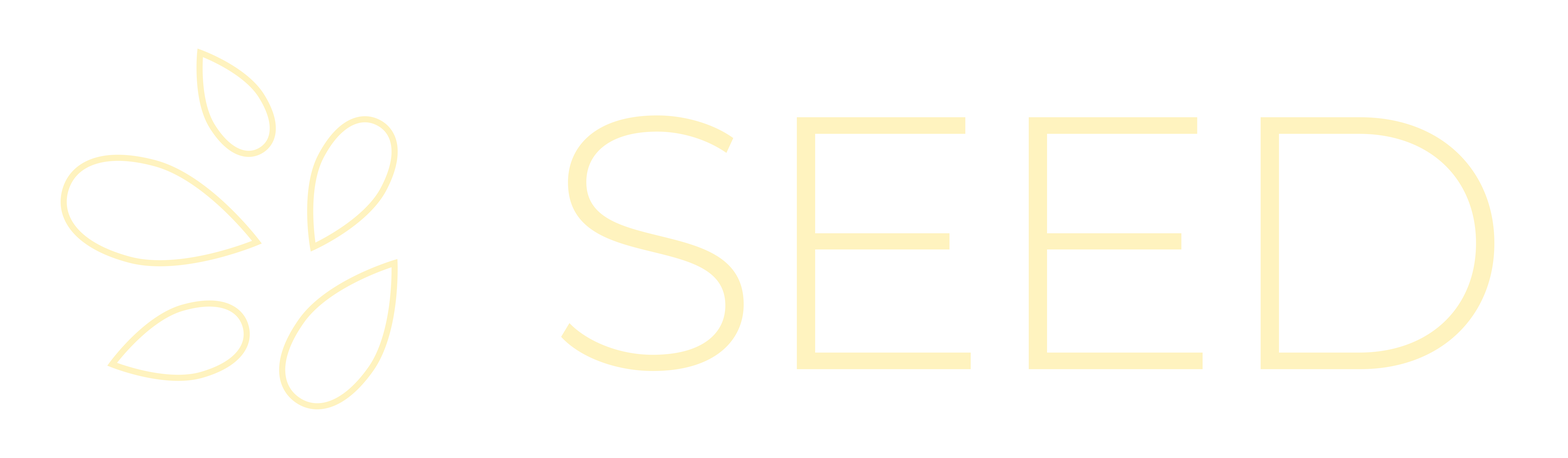
<style>
.page{position:relative;width:1568px;height:458px;background:#ffffff}
.page>*{position:absolute;margin:0}
.t1{font:360px "Montserrat-Light";letter-spacing:-0.025em;color:#fff3bf;text-transform:uppercase}
</style>
<div class="page">
<p class="t1" style="left:561px;top:115px;width:933px;height:256px">seed</p>
</div>
